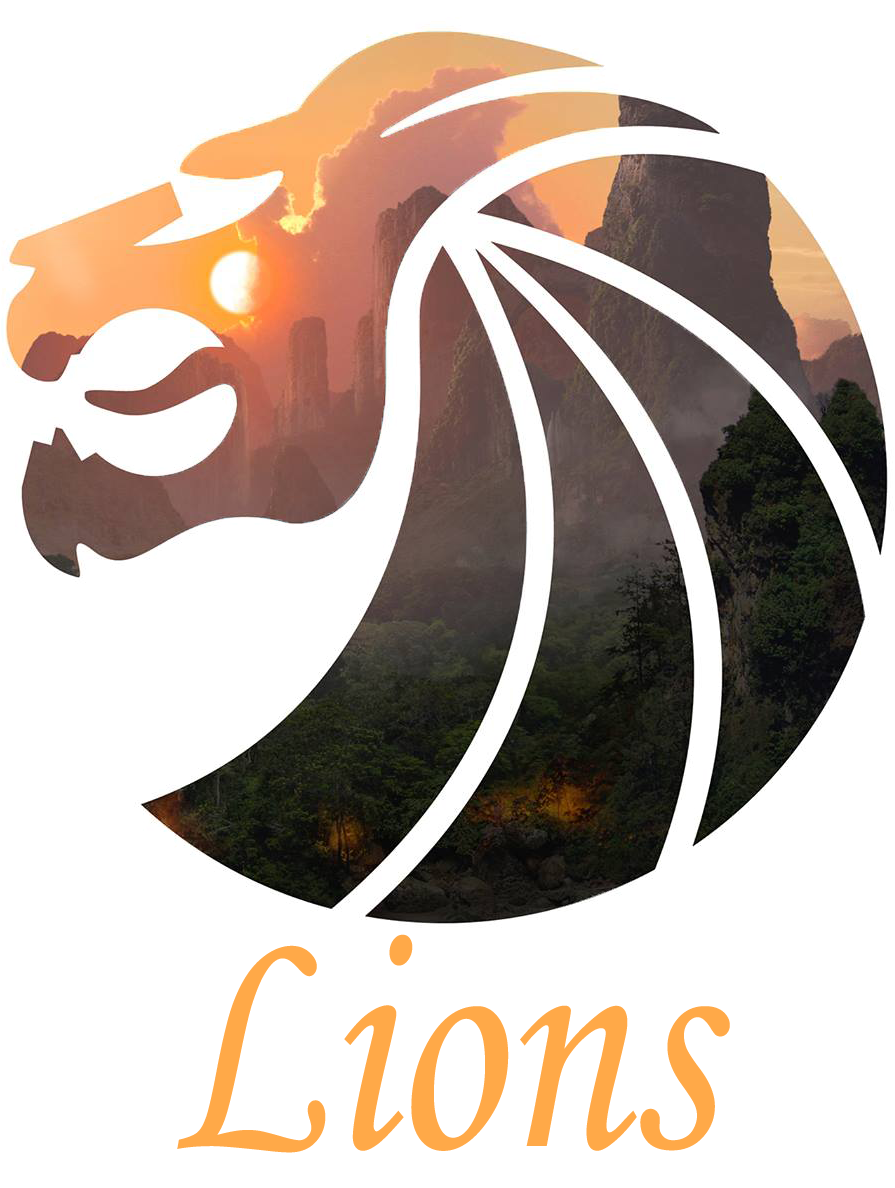
<style>
.page{position:relative;width:895px;height:1188px;background:#ffffff}
.page>*{position:absolute;margin:0}
.t1{font:340.2px "MonotypeCorsiva";color:#ffa948;scale:0.8 1}
</style>
<div class="page">
<p class="t1" style="left:177px;top:934px;width:553px;height:219px">Lions</p>
</div>
